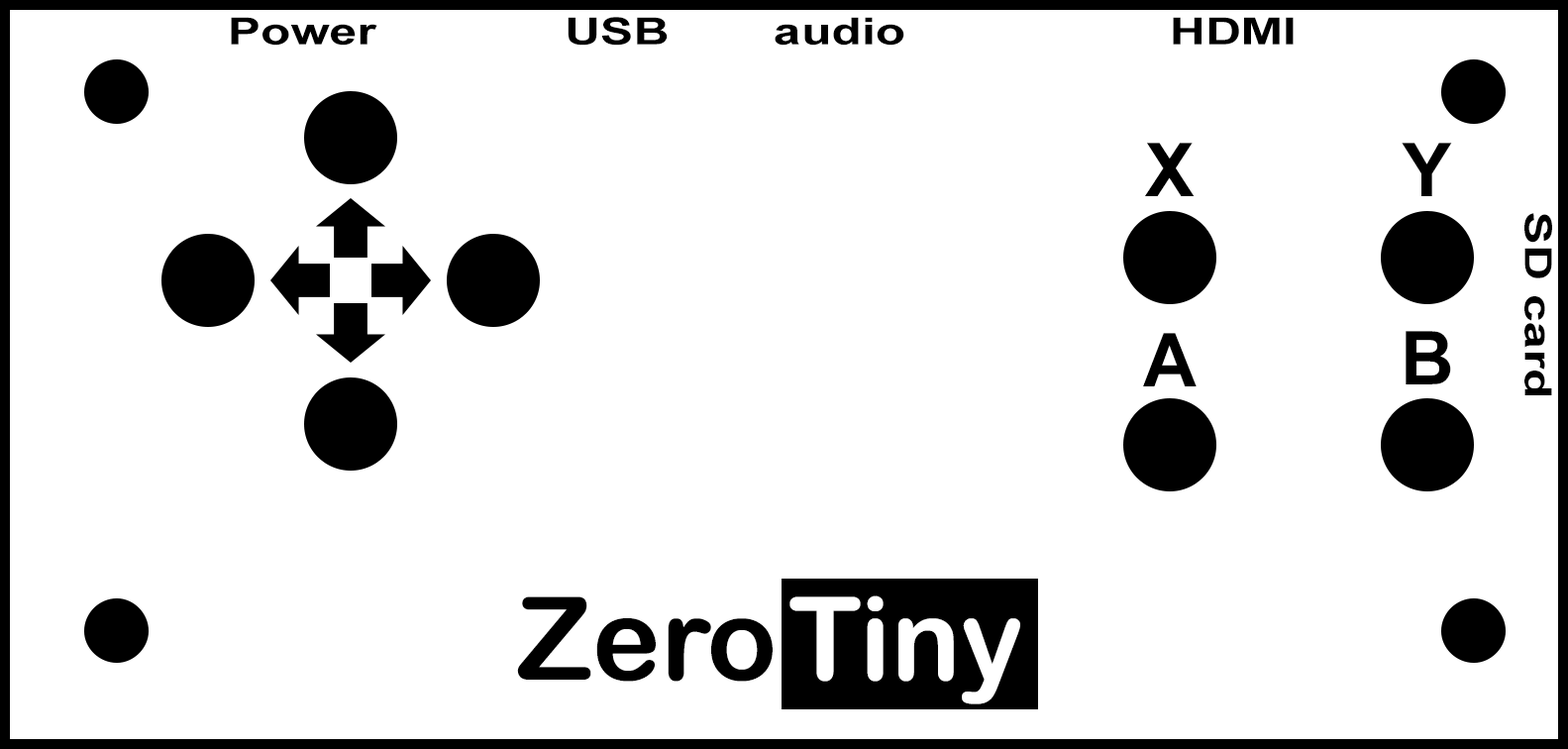
<style>
.page{position:relative;width:1568px;height:749px;background:#ffffff}
.page>*{position:absolute;margin:0}
.t1{font:37.1px "Arial-BoldMT";color:#000000;scale:1.33 1}
.t2{font:74.3px "Arial-BoldMT";color:#000000}
</style>
<div class="page">
<p class="t1" style="left:231px;top:17px;width:146px;height:29px">Power</p>
<p class="t1" style="left:568px;top:17px;width:100px;height:29px">USB</p>
<p class="t1" style="left:775px;top:17px;width:129px;height:29px">audio</p>
<p class="t1" style="left:1173px;top:17px;width:121px;height:28px">HDMI</p>
<p class="t2" style="left:1145px;top:143px;width:50px;height:53px">X</p>
<p class="t2" style="left:1402px;top:143px;width:50px;height:53px">Y</p>
<p class="t1" style="left:1524px;top:213px;width:28px;height:182px;rotate:90deg">SD card</p>
<p class="t2" style="left:1143px;top:333px;width:54px;height:53px">A</p>
<p class="t2" style="left:1406px;top:331px;width:45px;height:53px">B</p>
</div>
